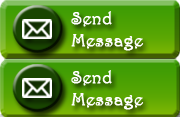
<style>
.page{position:relative;width:180px;height:117px}
.page>*{position:absolute;margin:0}
.t1{font:18px "Harrington";color:#ffffff;font-weight:bold}
</style>
<div class="page">
<p class="t1" style="left:71px;top:11px;width:73px;height:40px">Send<br>Message</p>
<p class="t1" style="left:71px;top:70px;width:73px;height:40px">Send<br>Message</p>
</div>
